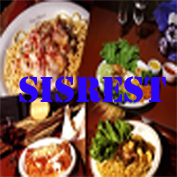
<style>
.page{position:relative;width:177px;height:177px}
.page>*{position:absolute;margin:0}
.t1{font:37.5px "Stencil";color:#2d05f8}
</style>
<div class="page">
<p class="t1" style="left:19px;top:76px;width:147px;height:27px">SisRest</p>
</div>
